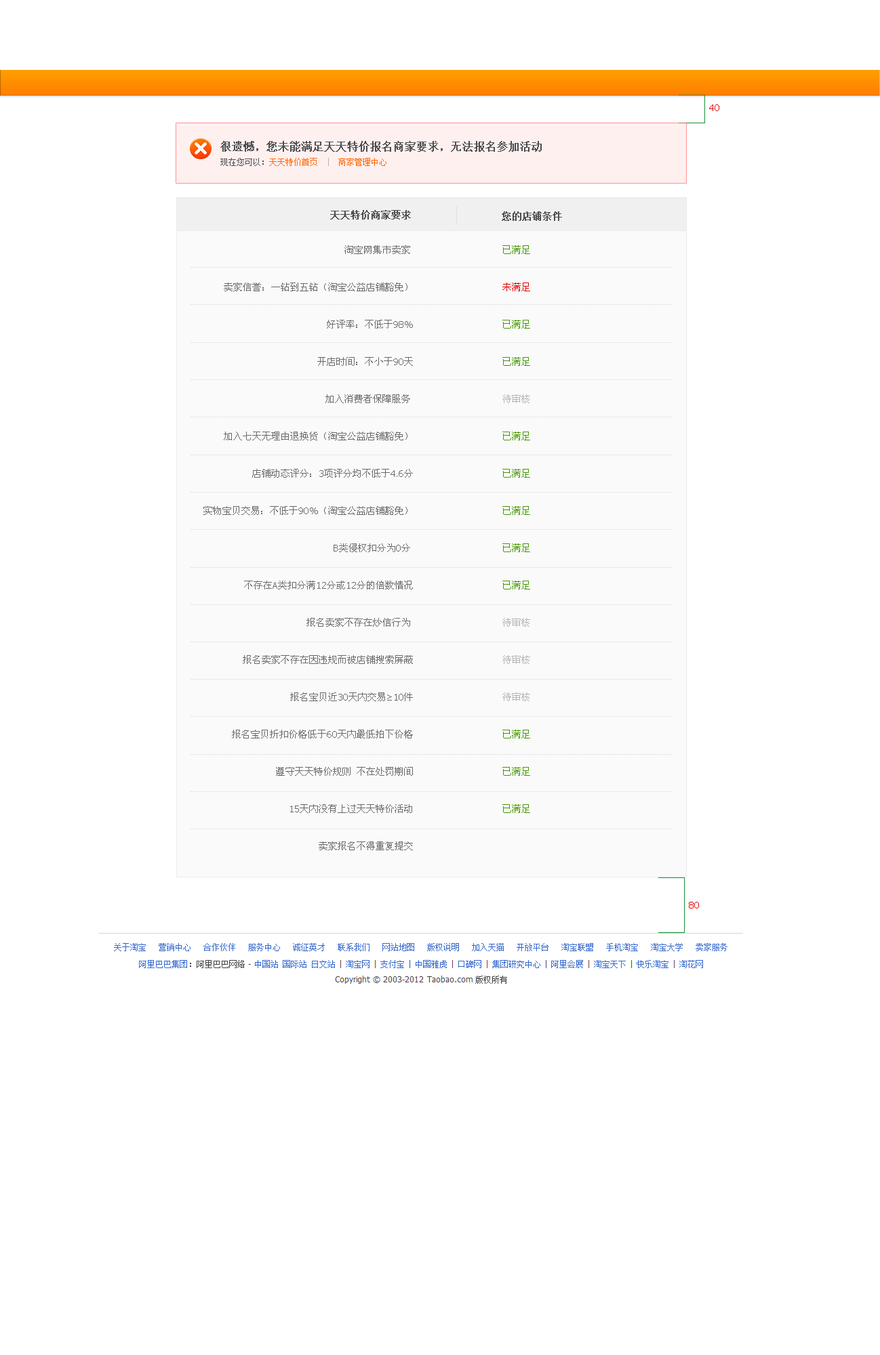
<style>
.page{position:relative;width:880px;height:1355px;background:#ffffff}
.page>*{position:absolute;margin:0}
.t1{font:9.5px "Tahoma";color:#e00000}
.t2{font:10.8px/16.3px "SimSun";color:#4d4d4d;font-weight:bold}
.t3{font:8.1px/16.3px "SimSun";color:#4d4d4d}
.t4{font:8.1px/16.3px "SimSun";color:#ff6600}
.t5{font:8.1px/16.3px "SimSun";color:#b3b3b3}
.t6{font:9.5px "SimSun";color:#4d4d4d;font-weight:bold}
.t7{font:9.5px/37.3px "SimSun";color:#696969}
.t8{font:9.5px/37.3px "Tahoma";color:#696969}
.t9{font:9.5px/37.3px "SimSun";color:#459700}
.t10{font:9.5px/37.3px "SimSun";color:#e00000}
.t11{font:9.5px/37.3px "SimSun";color:#b3b3b3}
</style>
<div class="page">
<p class="t1" style="left:709px;top:104px;width:10px;height:7px">40</p>
<p class="t2" style="left:220px;top:141px;width:322px;height:25px">很遗憾，您未能满足天天特价报名商家要求，无法报名参加活动<br><span class="t3">现在您可以：</span><span class="t4">天天特价首页  </span><span class="t5">|  </span><span class="t4">商家管理中心</span></p>
<p class="t6" style="left:330px;top:210px;width:81px;height:10px">天天特价商家要求</p>
<p class="t6" style="left:502px;top:211px;width:60px;height:10px">您的店铺条件</p>
<p class="t7" style="left:203px;top:245px;width:210px;height:606px;text-align:right">淘宝网集市卖家 <br>卖家信誉：一钻到五钻（淘宝公益店铺豁免）<br>好评率：不低于<span class="t8">98%<br></span>开店时间：不小于<span class="t8">90</span>天<br>加入消费者保障服务 <br>加入七天无理由退换货（淘宝公益店铺豁免）<br>店铺动态评分：<span class="t8">3</span>项评分均不低于<span class="t8">4.6</span>分<br>实物宝贝交易：不低于<span class="t8">90%</span>（淘宝公益店铺豁免）<span class="t8"><br>B</span>类侵权扣分为<span class="t8">0</span>分 <br>不存在<span class="t8">A</span>类扣分满<span class="t8">12</span>分或<span class="t8">12</span>分的倍数情况<br>报名卖家不存在炒信行为 <br>报名卖家不存在因违规而被店铺搜索屏蔽<br>报名宝贝近<span class="t8">30</span>天内交易<span class="t8">≥10</span>件<br>报名宝贝折扣价格低于<span class="t8">60</span>天内最低拍下价格<br>遵守天天特价规则 不在处罚期间<br><span class="t8">15</span>天内没有上过天天特价活动<br>卖家报名不得重复提交</p>
<p class="t9" style="left:502px;top:245px;width:28px;height:568px">已满足<br><span class="t10">未满足<br></span>已满足<br>已满足<br><span class="t11">待审核<br></span>已满足<br>已满足<br>已满足<br>已满足<br>已满足<br><span class="t11">待审核<br>待审核<br>待审核<br></span>已满足<br>已满足<br>已满足</p>
<p class="t1" style="left:689px;top:902px;width:10px;height:7px">80</p>
</div>
